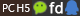
<style>
.page{position:relative;width:80px;height:16px;background:#3b2921}
.page>*{position:absolute;margin:0}
.t1{font:10px "MicrosoftYaHei";color:#fdfcfc}
</style>
<div class="page">
<p class="t1" style="left:3px;top:4px;width:12px;height:8px">PC</p>
<p class="t1" style="left:17px;top:4px;width:13px;height:8px">H5</p>
</div>
